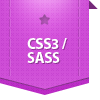
<style>
.page{position:relative;width:100px;height:100px;background:#ffffff}
.page>*{position:absolute;margin:0}
.t1{font:15px "MyriadPro-Bold";letter-spacing:-0.025em;color:#ffffff;text-transform:uppercase}
</style>
<div class="page">
<p class="t1" style="left:27px;top:38px;width:40px;height:25px">CSS3 / SASS</p>
</div>
